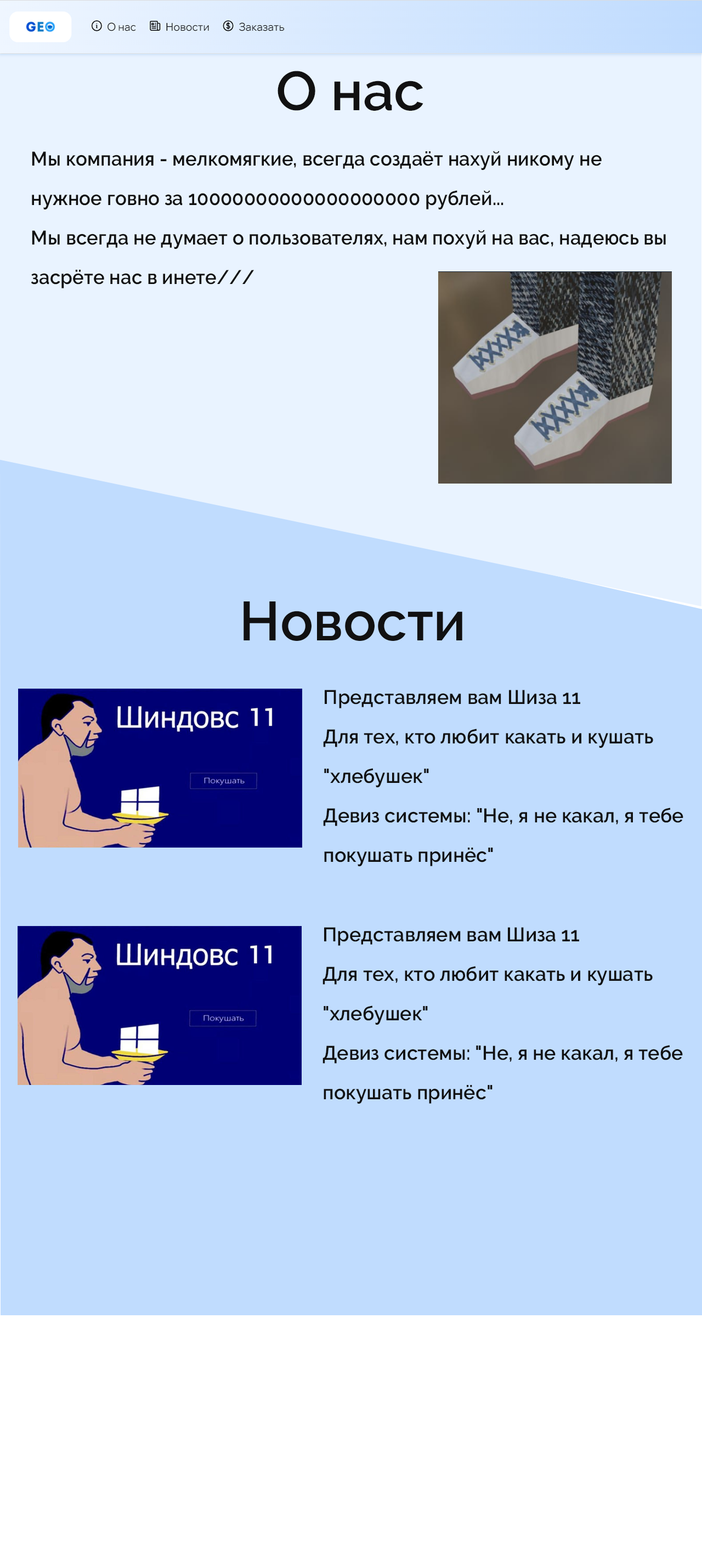
<style>
.page{position:relative;width:702px;height:1568px;background:#c0dcfe}
.page>*{position:absolute;margin:0}
.t1{font:54.8px "Raleway-SemiBold";color:#111111}
.t2{font:19.7px/39.5px "Raleway-SemiBold";color:#111111;scale:0.97 1}
.t3{font:19.7px/39.5px "Raleway-SemiBold";color:#111111}
.t4{font:19.8px/39.5px "Raleway-SemiBold";color:#111111}
</style>
<div class="page">
<p class="t1" style="left:277px;top:71px;width:146px;height:40px">О нас</p>
<p class="t2" style="left:31px;top:151px;width:635px;height:137px">Мы компания - мелкомягкие, всегда создаёт нахуй никому не нужное говно за 10000000000000000000 рублей...<br>Мы всегда не думает о пользователях, нам похуй на вас, надеюсь вы засрёте нас в инете///</p>
<p class="t1" style="left:243px;top:601px;width:219px;height:40px">Новости</p>
<p class="t3" style="left:323px;top:690px;width:360px;height:176px">Представляем вам Шиза 11<br>Для тех, кто любит какать и кушать "хлебушек"<br>Девиз системы: "Не, я не какал, я тебе покушать принёс"</p>
<p class="t4" style="left:322px;top:927px;width:361px;height:177px">Представляем вам Шиза 11<br>Для тех, кто любит какать и кушать "хлебушек"<br>Девиз системы: "Не, я не какал, я тебе покушать принёс"</p>
</div>
